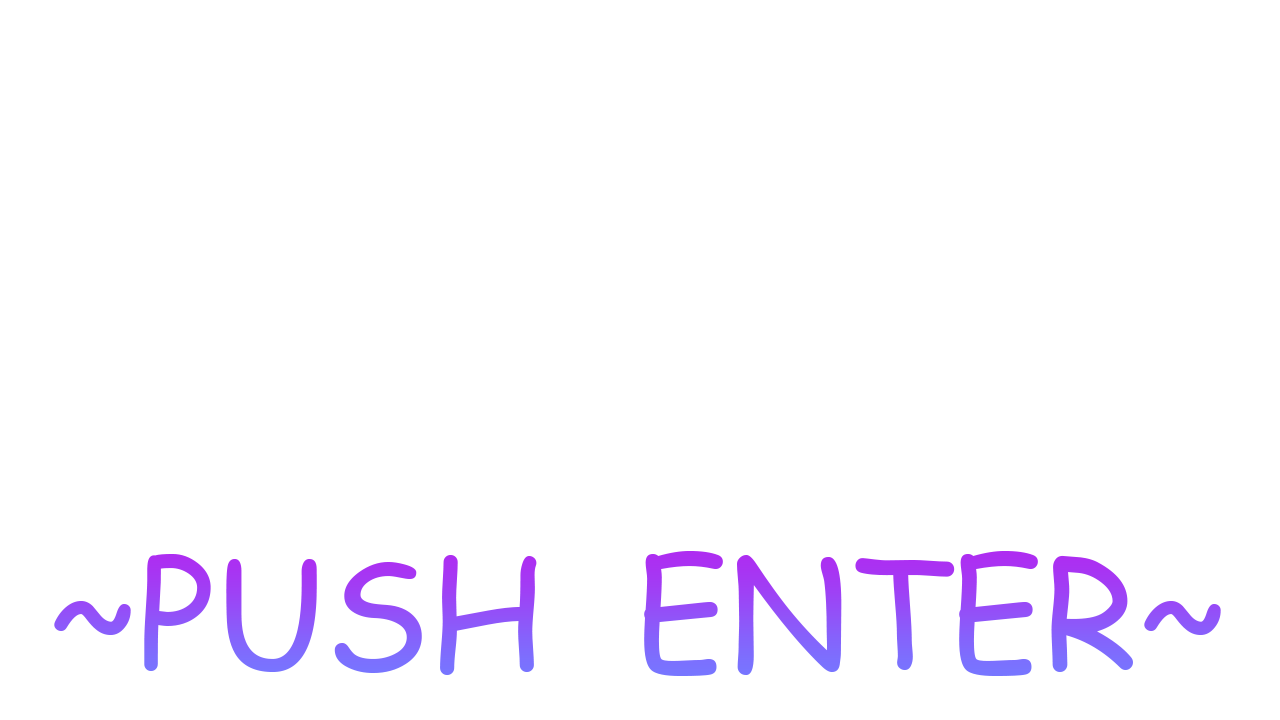
<style>
.page{position:relative;width:1280px;height:720px;background:#ffffff}
.page>*{position:absolute;margin:0}
.t1{font:150px "ComicSansMS"}
</style>
<div class="page">
<p class="t1" style="left:54px;top:551px;width:1167px;height:125px">~PUSH  ENTER~</p>
</div>
